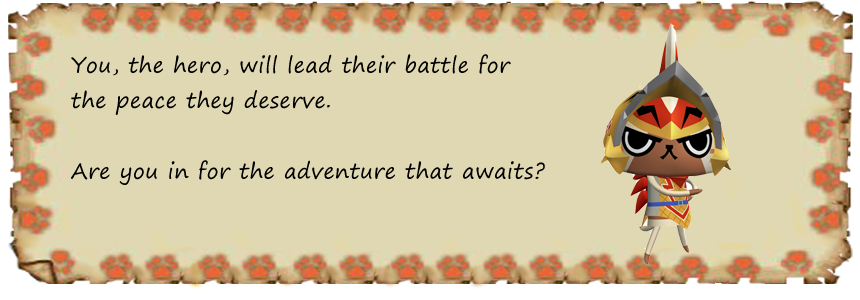
<style>
.page{position:relative;width:860px;height:300px;background:#e0d8b3}
.page>*{position:absolute;margin:0}
.t1{font:21.2px/35.3px "SegoePrint";letter-spacing:0.025em;color:#000000}
</style>
<div class="page">
<p class="t1" style="left:71px;top:54px;width:474px;height:131px">You, the hero, will lead their battle for <br>the peace they deserve. <br><br>Are you in for the adventure that awaits?</p>
</div>
